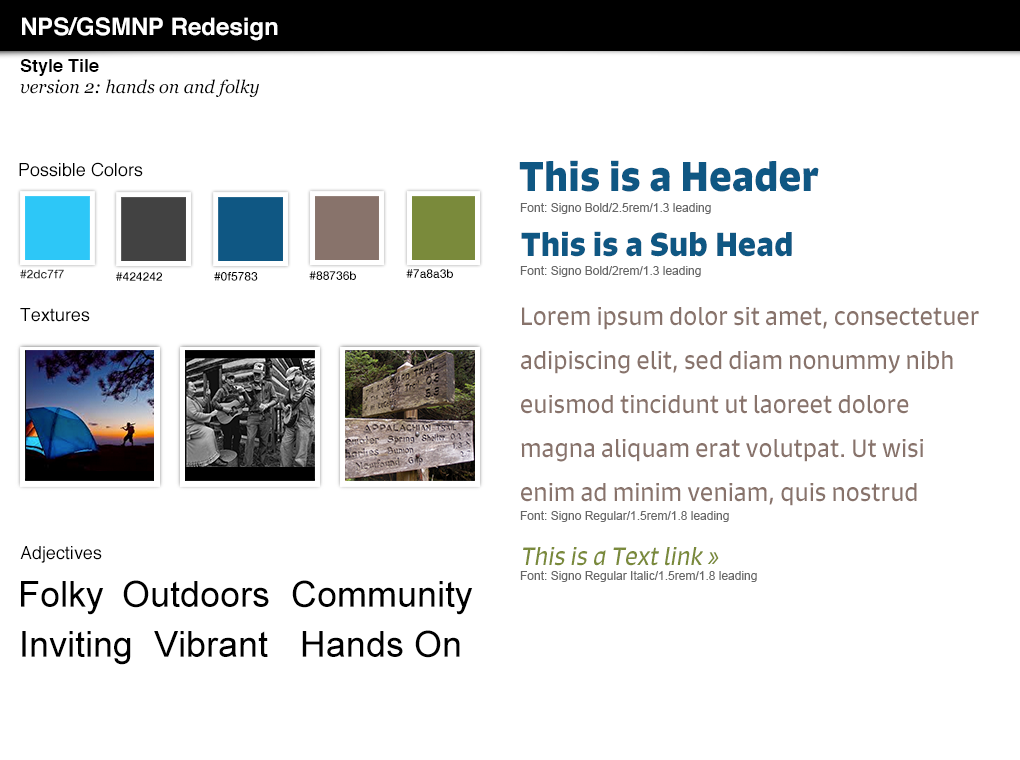
<style>
.page{position:relative;width:1020px;height:760px;background:#ffffff}
.page>*{position:absolute;margin:0}
.t1{font:24px "Helvetica-Bold";color:#ffffff}
.t2{font:18px "Helvetica-Bold";color:#000000}
.t3{font:18px "Georgia-Italic";color:#000000}
.t4{font:40px "Signo-Bold";color:#0f5783}
.t5{font:18px "Helvetica";color:#000000}
.t6{font:12px "ArialMT";color:#666666}
.t7{font:32px "Signo-Bold";color:#0f5783}
.t8{font:12px "HelveticaNeue-Medium";color:#282828}
.t9{font:12px "HelveticaNeue-Medium";color:#000000}
.t10{font:24px/44px "Signo-Regular";color:#88736b}
.t11{font:24px "Signo-Italic";color:#7a8a3b}
.t12{font:36px "ArialMT";color:#000000}
</style>
<div class="page">
<p class="t1" style="left:22px;top:17px;width:256px;height:24px">NPS/GSMNP Redesign</p>
<p class="t2" style="left:20px;top:59px;width:79px;height:17px">Style Tile</p>
<p class="t3" style="left:20px;top:79px;width:239px;height:18px">version 2: hands on and folky</p>
<p class="t4" style="left:519px;top:160px;width:300px;height:32px">This is a Header</p>
<p class="t5" style="left:19px;top:162px;width:124px;height:15px">Possible Colors</p>
<p class="t6" style="left:520px;top:203px;width:191px;height:11px">Font: Signo Bold/2.5rem/1.3 leading</p>
<p class="t7" style="left:521px;top:231px;width:271px;height:26px">This is a Sub Head</p>
<p class="t8" style="left:20px;top:269px;width:44px;height:10px">#2dc7f7</p>
<p class="t9" style="left:406px;top:269px;width:47px;height:9px">#7a8a3b</p>
<p class="t6" style="left:520px;top:266px;width:181px;height:11px">Font: Signo Bold/2rem/1.3 leading</p>
<p class="t9" style="left:116px;top:272px;width:46px;height:9px">#424242</p>
<p class="t9" style="left:214px;top:272px;width:44px;height:9px">#0f5783</p>
<p class="t9" style="left:309px;top:271px;width:47px;height:9px">#88736b</p>
<p class="t5" style="left:20px;top:308px;width:70px;height:14px">Textures</p>
<p class="t10" style="left:521px;top:307px;width:458px;height:199px">Lorem ipsum dolor sit amet, consectetuer adipiscing elit, sed diam nonummy nibh euismod tincidunt ut laoreet dolore magna aliquam erat volutpat. Ut wisi enim ad minim veniam, quis nostrud exerci tation ullamcorper suscipit lobortis nisl ut aliquip ex ea commodo consequat. Duis autem vel feugait.</p>
<p class="t6" style="left:520px;top:511px;width:209px;height:11px">Font: Signo Regular/1.5rem/1.8 leading</p>
<p class="t5" style="left:20px;top:546px;width:82px;height:17px">Adjectives</p>
<p class="t11" style="left:523px;top:547px;width:196px;height:19px">This is a Text link »</p>
<p class="t12" style="left:21px;top:581px;width:83px;height:34px">Folky</p>
<p class="t12" style="left:123px;top:580px;width:146px;height:28px">Outdoors</p>
<p class="t12" style="left:292px;top:580px;width:181px;height:35px">Community</p>
<p class="t6" style="left:520px;top:571px;width:237px;height:11px">Font: Signo Regular Italic/1.5rem/1.8 leading</p>
<p class="t12" style="left:302px;top:630px;width:158px;height:28px">Hands On</p>
<p class="t12" style="left:22px;top:631px;width:109px;height:34px">Inviting</p>
<p class="t12" style="left:154px;top:631px;width:114px;height:26px">Vibrant</p>
</div>
